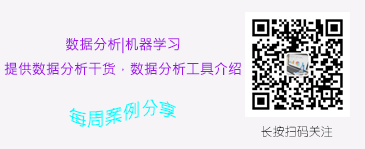
<style>
.page{position:relative;width:365px;height:149px;background:#f6f4f7}
.page>*{position:absolute;margin:0}
.t1{font:14px "MicrosoftJhengHeiRegular";color:#a50feb}
.t2{font:18px "MicrosoftJhengHeiRegular";color:#04fcff}
.t3{font:12px "YouYuan"}
</style>
<div class="page">
<p class="t1" style="left:4px;top:37px;width:237px;height:38px;text-align:center">数据分析|机器学习<br>提供数据分析干货，数据分析工具介绍</p>
<p class="t2" style="left:69px;top:99px;width:107px;height:29px">每周案例分享</p>
<p class="t3" style="left:261px;top:125px;width:72px;height:12px">长按扫码关注</p>
</div>
